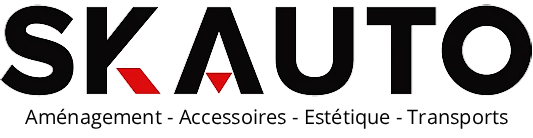
<style>
.page{position:relative;width:533px;height:138px;background:#ffffff}
.page>*{position:absolute;margin:0}
.t1{font:20px "OpenSansRoman-Regular";color:#000000}
</style>
<div class="page">
<p class="t1" style="left:25px;top:108px;width:483px;height:21px">Aménagement - Accessoires - Estétique - Transports</p>
</div>
